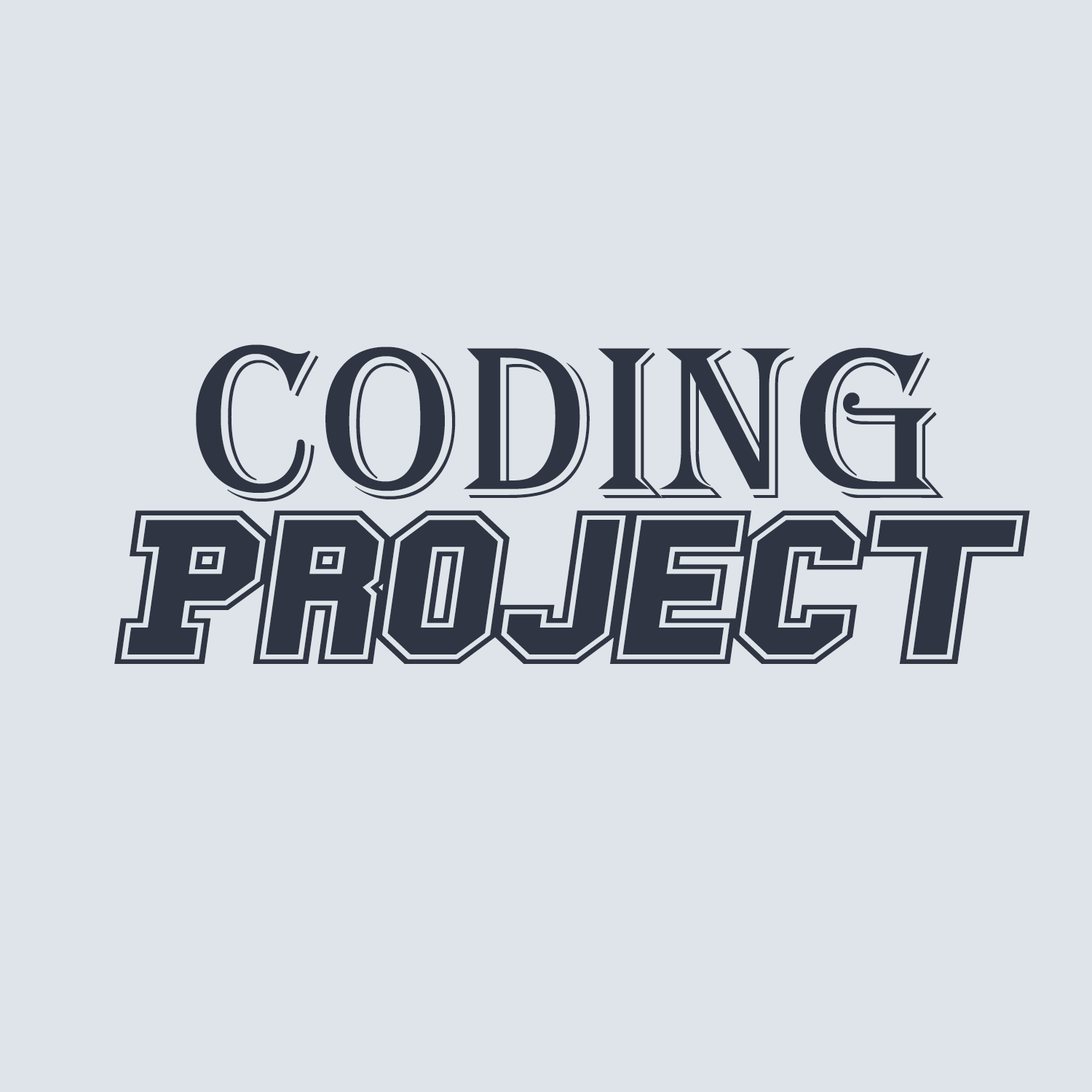
<style>
.page{position:relative;width:1092px;height:1092px;background:#dfe4ea}
.page>*{position:absolute;margin:0}
.t1{font:224.5px "Algerian";letter-spacing:-0.005em;color:#2f3542}
.t2{font:224.5px "CampusA-Bold";letter-spacing:-0.005em;color:#2f3542}
</style>
<div class="page">
<p class="t1" style="left:196px;top:344px;width:747px;height:158px">Coding</p>
<p class="t2" style="left:114px;top:510px;width:916px;height:154px">Project</p>
</div>
